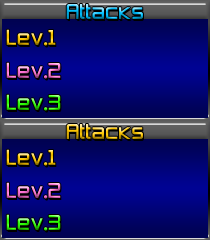
<style>
.page{position:relative;width:210px;height:240px}
.page>*{position:absolute;margin:0}
.t1{font:20px "ZeroThrees"}
</style>
<div class="page">
<p class="t1" style="left:66px;top:4px;width:77px;height:15px">Attacks</p>
<p class="t1" style="left:6px;top:29px;width:50px;height:17px">Lev.1</p>
<p class="t1" style="left:6px;top:62px;width:55px;height:17px">Lev.2</p>
<p class="t1" style="left:6px;top:94px;width:55px;height:17px">Lev.3</p>
<p class="t1" style="left:66px;top:124px;width:77px;height:15px">Attacks</p>
<p class="t1" style="left:6px;top:149px;width:50px;height:17px">Lev.1</p>
<p class="t1" style="left:6px;top:182px;width:55px;height:17px">Lev.2</p>
<p class="t1" style="left:6px;top:214px;width:55px;height:17px">Lev.3</p>
</div>
